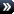
<style>
.page{position:relative;width:14px;height:14px}
.page>*{position:absolute;margin:0}
.t1{font:16.5px "Small Fonts";color:#f7f7f7;font-weight:bold;scale:1.09 1}
</style>
<div class="page">
<p class="t1" style="left:3px;top:3px;width:8px;height:8px">»</p>
</div>
